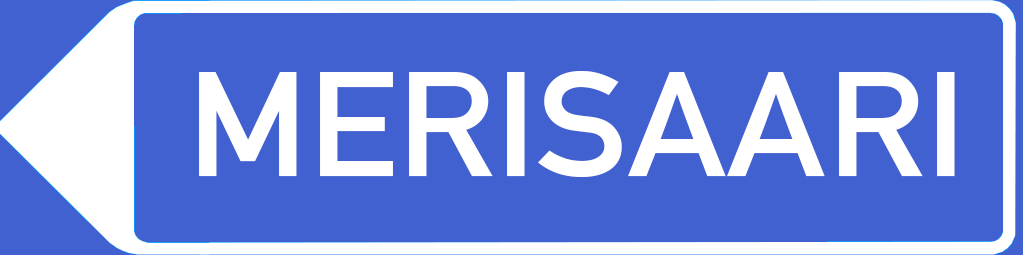
<style>
.page{position:relative;width:1023px;height:255px;background:#4261d1}
.page>*{position:absolute;margin:0}
.t1{font:145.6px "AlteDIN1451Mittelschrift";color:#ffffff;scale:1.1 1}
</style>
<div class="page">
<p class="t1" style="left:199px;top:71px;width:756px;height:106px">MERISAARI</p>
</div>
